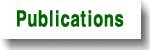
<style>
.page{position:relative;width:150px;height:50px;background:#ffffff}
.page>*{position:absolute;margin:0}
.t1{font:21px "H2gtrE";color:#006600;scale:0.76 1}
</style>
<div class="page">
<p class="t1" style="left:17px;top:10px;width:107px;height:17px">Publications</p>
</div>
